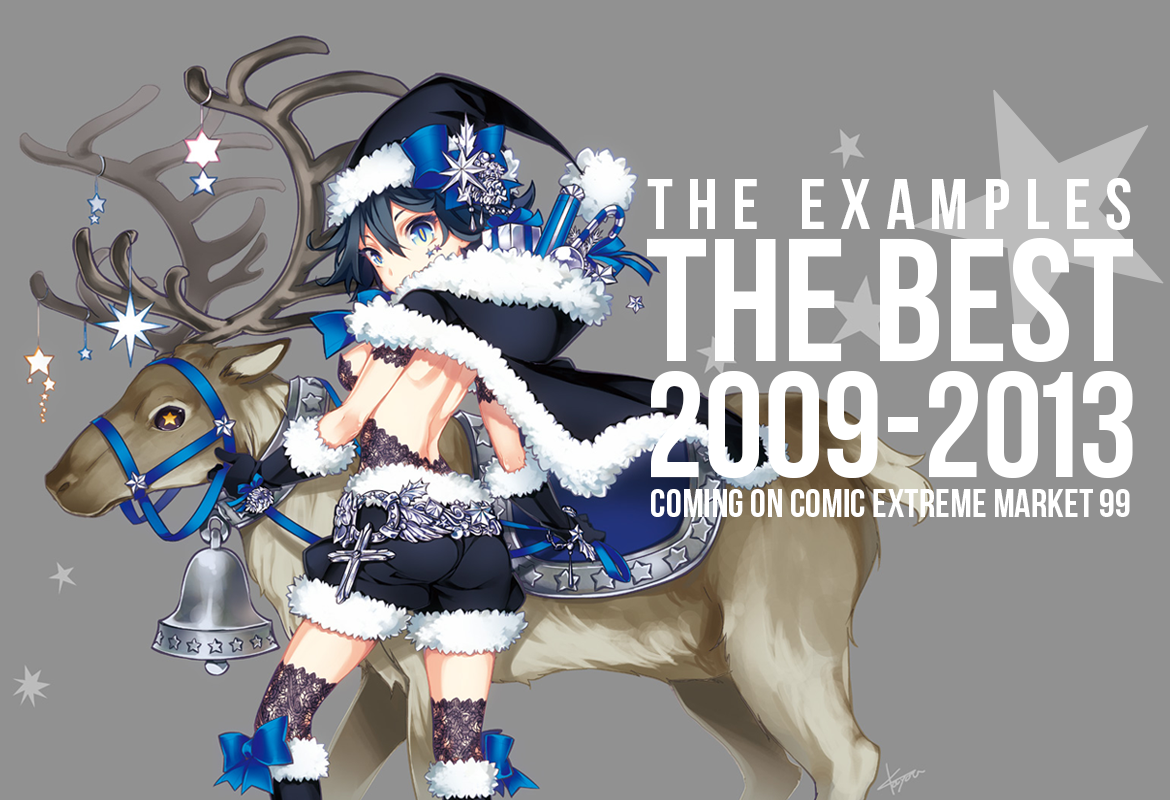
<style>
.page{position:relative;width:1170px;height:800px;background:#919191}
.page>*{position:absolute;margin:0}
.t1{font:276.4px "KozGoPr6N-Regular";color:#bcbcbc}
.t2{font:71.9px "BebasNeue";letter-spacing:0.2em;color:#ffffff}
.t3{font:174px "BebasNeue";color:#ffffff}
.t4{font:149.7px "BebasNeue";color:#ffffff}
.t5{font:39.8px "BebasNeue";color:#ffffff}
</style>
<div class="page">
<p class="t1" style="left:912px;top:89px;width:252px;height:257px;rotate:-23deg">★</p>
<p class="t2" style="left:647px;top:178px;width:484px;height:52px">THE EXAMPLES</p>
<p class="t3" style="left:647px;top:237px;width:486px;height:125px">THE BEST</p>
<p class="t4" style="left:651px;top:371px;width:482px;height:108px">2009-2013</p>
<p class="t5" style="left:651px;top:489px;width:479px;height:28px">COMING ON COMIC EXTREME MARKET 99</p>
</div>
